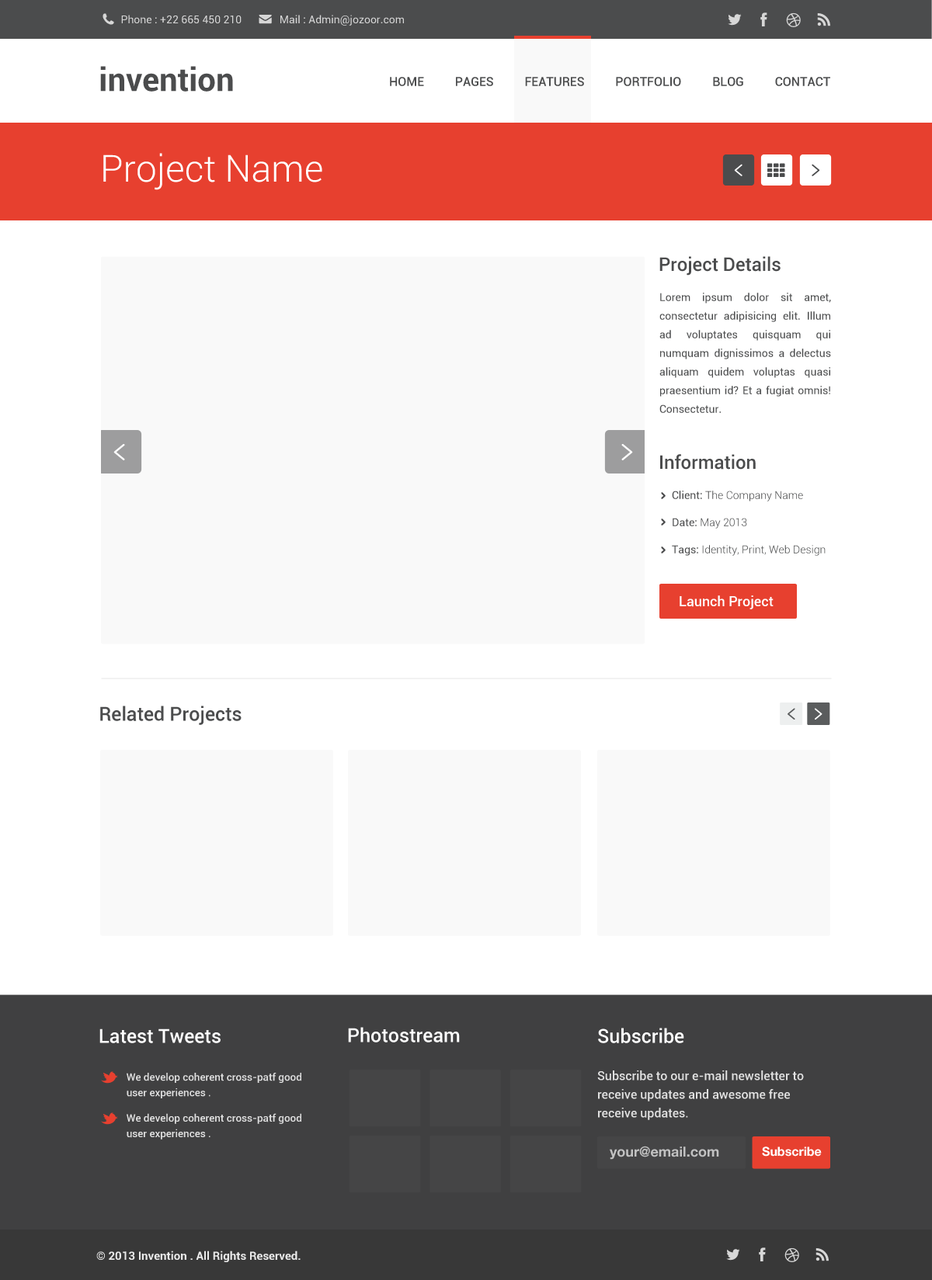
<style>
.page{position:relative;width:932px;height:1280px;background:#ffffff}
.page>*{position:absolute;margin:0}
.t1{font:10.9px "Roboto-Regular";color:#d7d7d7}
.t2{font:12.4px "Roboto-Medium";color:#4b4c4d}
.t3{font:37.3px "Roboto-Light";color:#ffffff}
.t4{font:18.6px "Roboto-Medium";color:#4b4c4d}
.t5{font:10.9px/18.6px "Roboto-Regular";color:#4b4c4d}
.t6{font:10.9px/27.2px "Roboto-Light";color:#4b4c4d}
.t7{font:10.9px/27.2px "Roboto-Regular";color:#4b4c4d}
.t8{font:14px "Roboto-Medium";color:#ffffff}
.t9{font:19.4px "Roboto-Medium";color:#4b4c4d}
.t10{font:19.4px "Roboto-Medium";color:#ffffff}
.t11{font:12.4px/18.6px "Roboto-Medium";color:#e1e1e1}
.t12{font:19.4px/22.2px "Roboto-Medium";color:#ffffff}
.t13{font:10.4px/15.6px "Roboto-Medium";color:#e1e1e1}
.t14{font:18.6px/5.2px "Roboto-Bold";color:#ffffff}
.t15{font:14px "HelveticaNeue-Bold";color:#c2c2c2}
.t16{font:12.4px "HelveticaNeue-Bold";color:#ffffff}
.t17{font:11.6px "Roboto-Bold";color:#eaeaea}
</style>
<div class="page">
<p class="t1" style="left:121px;top:15px;width:283px;height:11px">Phone : +22 665 450 210              Mail : Admin@jozoor.com</p>
<p class="t2" style="left:390px;top:77px;width:440px;height:9px">HOME          PAGES          FEATURES          PORTFOLIO          BLOG          CONTACT</p>
<p class="t3" style="left:103px;top:153px;width:219px;height:37px">Project Name</p>
<p class="t4" style="left:659px;top:256px;width:121px;height:20px">Project Details</p>
<p class="t5" style="left:659px;top:293px;width:172px;height:120px;text-align:justify">Lorem ipsum dolor sit amet, consectetur adipisicing elit. Illum ad voluptates quisquam qui numquam dignissimos a delectus aliquam quidem voluptas quasi praesentium id? Et a fugiat omnis! Consectetur.</p>
<p class="t4" style="left:660px;top:454px;width:95px;height:16px">Information</p>
<p class="t6" style="left:671px;top:491px;width:154px;height:65px"><span class="t7">Client: </span>The Company Name<br><span class="t7">Date: </span>May 2013<br><span class="t7">Tags: </span>Identity, Print, Web Design</p>
<p class="t8" style="left:679px;top:595px;width:94px;height:14px">Launch Project</p>
<p class="t9" style="left:100px;top:706px;width:141px;height:19px">Related Projects</p>
<p class="t10" style="left:99px;top:1029px;width:121px;height:14px">Latest Tweets</p>
<p class="t10" style="left:348px;top:1027px;width:112px;height:16px">Photostream</p>
<p class="t11" style="left:597px;top:1028px;width:206px;height:92px"><span class="t12">Subscribe<br><br><br><br></span>Subscribe to our e-mail newsletter to<br>receive updates and awesome free<br>receive updates.</p>
<p class="t13" style="left:127px;top:1073px;width:174px;height:67px"><span class="t14"><br>        </span>We develop coherent cross-patf good<br>        user experiences .<br><br>        We develop coherent cross-patf good<br>        user experiences .</p>
<p class="t15" style="left:609px;top:1146px;width:110px;height:14px">your@email.com</p>
<p class="t16" style="left:762px;top:1147px;width:59px;height:10px">Subscribe</p>
<p class="t17" style="left:96px;top:1251px;width:204px;height:11px">© 2013 Invention . All Rights Reserved.</p>
</div>
